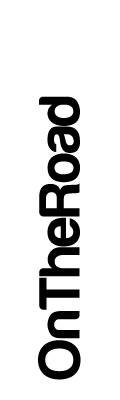
<style>
.page{position:relative;width:120px;height:400px;background:#ffffff}
.page>*{position:absolute;margin:0}
.t1{font:60px "Harabara-Bold";color:#000000}
</style>
<div class="page">
<p class="t1" style="left:38px;top:96px;width:43px;height:284px;rotate:-90deg">OnTheRoad</p>
</div>
